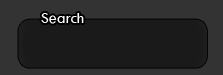
<style>
.page{position:relative;width:223px;height:75px;background:#1a1a1a}
.page>*{position:absolute;margin:0}
.t1{font:16px "TwCenMT-Regular";color:#ffffff}
</style>
<div class="page">
<p class="t1" style="left:41px;top:13px;width:43px;height:11px">Search</p>
</div>
